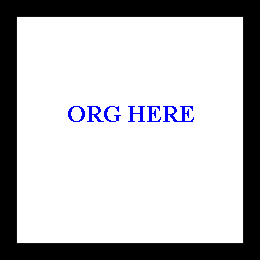
<style>
.page{position:relative;width:260px;height:260px;background:#ffffff}
.page>*{position:absolute;margin:0}
.t1{font:24px "TimesNewRomanPS-BoldMT";color:#0000ff}
</style>
<div class="page">
<p class="t1" style="left:68px;top:106px;width:126px;height:16px">ORG HERE</p>
</div>
